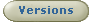
<style>
.page{position:relative;width:92px;height:22px}
.page>*{position:absolute;margin:0}
.t1{font:11px "Verdana-Bold";color:#336699}
</style>
<div class="page">
<p class="t1" style="left:19px;top:6px;width:54px;height:8px">Versions</p>
</div>
